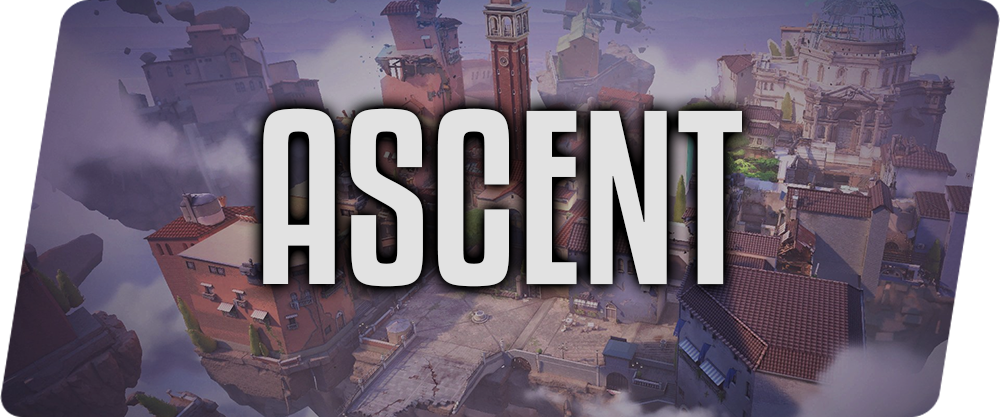
<style>
.page{position:relative;width:1000px;height:417px}
.page>*{position:absolute;margin:0}
.t1{font:219.5px "KenyanCoffeeRg-Regular";color:#e2e2e2}
</style>
<div class="page">
<p class="t1" style="left:263px;top:108px;width:479px;height:179px">ASCENT</p>
</div>
